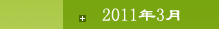
<style>
.page{position:relative;width:219px;height:29px}
.page>*{position:absolute;margin:0}
.t1{font:18px "LiSu";color:#fcfafa}
</style>
<div class="page">
<p class="t1" style="left:102px;top:8px;width:78px;height:13px">2011年3月</p>
</div>
